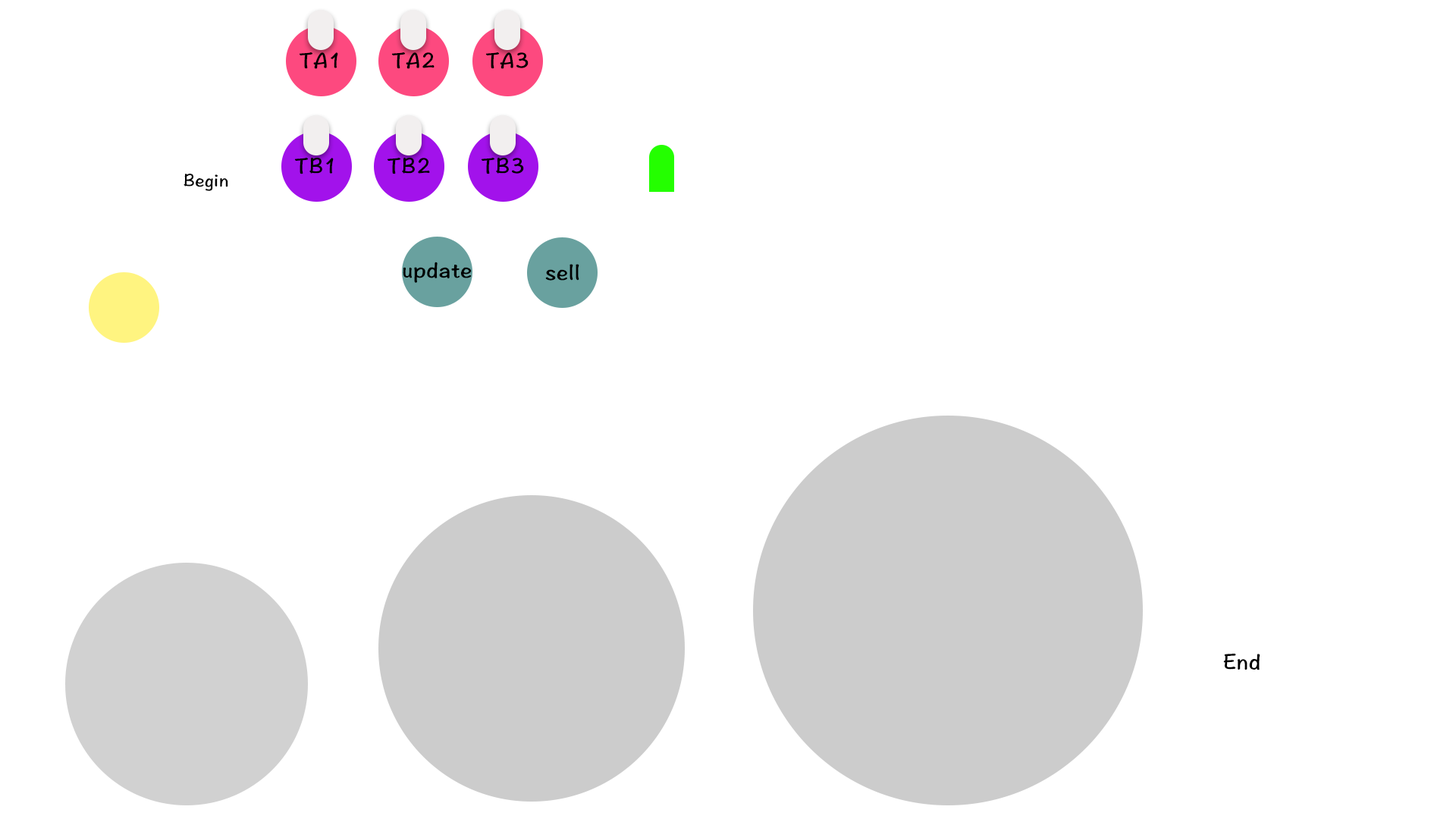
<style>
.page{position:relative;width:1456px;height:819px;background:#ffffff}
.page>*{position:absolute;margin:0}
.t1{font:22.7px "HannotateSC-W7";color:#000000}
.t2{font:18.3px "HannotateSC-W7";color:#010101}
</style>
<div class="page">
<p class="t1" style="left:299px;top:52px;width:39px;height:17px">TA1</p>
<p class="t1" style="left:391px;top:52px;width:44px;height:17px">TA2</p>
<p class="t1" style="left:485px;top:52px;width:44px;height:17px">TA3</p>
<p class="t1" style="left:294px;top:157px;width:40px;height:17px">TB1</p>
<p class="t1" style="left:387px;top:157px;width:43px;height:17px">TB2</p>
<p class="t1" style="left:481px;top:157px;width:43px;height:17px">TB3</p>
<p class="t2" style="left:184px;top:174px;width:44px;height:17px">Begin</p>
<p class="t1" style="left:403px;top:262px;width:69px;height:21px">update</p>
<p class="t1" style="left:545px;top:264px;width:34px;height:17px">sell</p>
<p class="t1" style="left:1223px;top:654px;width:37px;height:16px">End</p>
</div>
